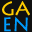
<style>
.page{position:relative;width:32px;height:32px;background:#101010}
.page>*{position:absolute;margin:0}
.t1{font:19px "LithosPro-Regular";color:#ffcc00}
.t2{font:19px "LithosPro-Regular";color:#009cff}
</style>
<div class="page">
<p class="t1" style="left:2px;top:1px;width:28px;height:15px">GA</p>
<p class="t2" style="left:4px;top:16px;width:24px;height:16px">EN</p>
</div>
